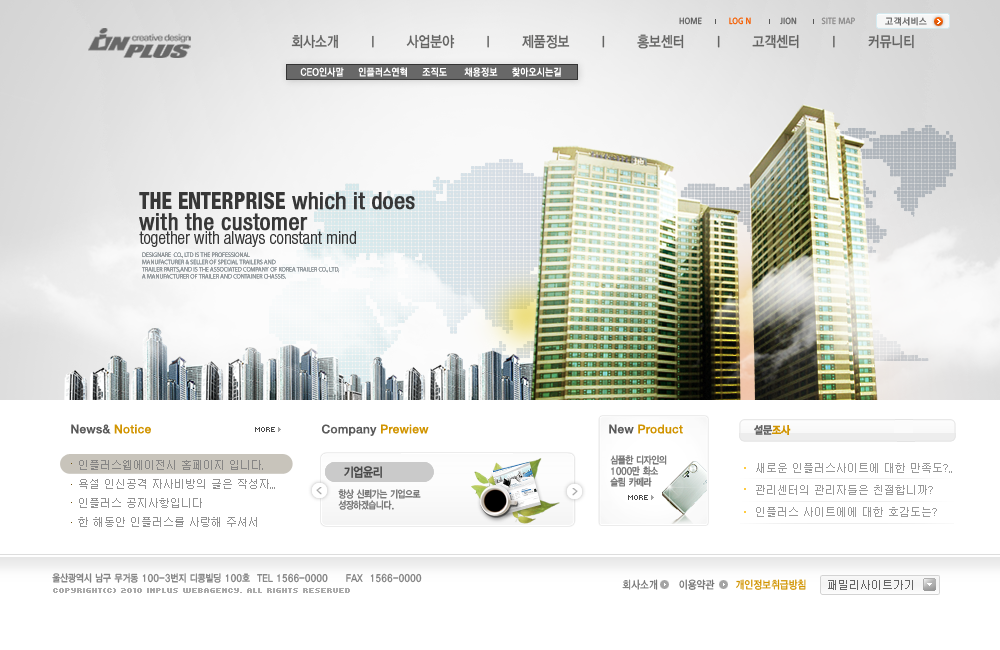
<style>
.page{position:relative;width:1000px;height:650px;background:#ffffff}
.page>*{position:absolute;margin:0}
.t1{font:9px "Moebius";color:#8d8c8c;text-transform:uppercase;scale:0.9 1}
.t2{font:9px "Moebius";color:#636363;text-transform:uppercase;scale:0.9 1}
.t3{font:9px "Moebius";color:#f55d00;text-transform:uppercase;scale:0.9 1}
.t4{font:9px "YGO530";letter-spacing:0.04em;color:#656565}
.t5{font:15px "YGO33";letter-spacing:-0.075em;color:#646362;scale:0.85 1}
.t6{font:10px "YGO540";letter-spacing:0.02em;color:#ffffff;scale:0.9 1}
.t7{font:23.5px/20.9px "HelveticaNeue-Condensed";color:#373737;font-weight:bold}
.t8{font:23.5px/20.9px "HelveticaNeue-HeavyCond";color:#373737;text-transform:uppercase;scale:0.9 1}
.t9{font:17.4px "HelveticaNeue-LightCond";color:#373737}
.t10{font:12px "Helvetica65-Medium";letter-spacing:0.02em;color:#d19400}
.t11{font:12px "Helvetica65-Medium";letter-spacing:0.02em;color:#5a5a5a}
.t12{font:11px "YGO15";letter-spacing:-0.09em;color:#646464;scale:0.9 1}
.t13{font:11px "YGO15";letter-spacing:-0.09em;color:#d19400;scale:0.9 1}
.t14{font:11px/19px "Dotum";color:#929292}
.t15{font:10px/11px "YGO33";letter-spacing:-0.115em;color:#747474;scale:0.85 1}
.t16{font:13px "YGO34";letter-spacing:-0.115em;color:#484848;scale:0.85 1}
.t17{font:11px/22px "Dotum";color:#999999}
.t18{font:11px/14px "Dotum";color:#999999}
.t19{font:10px "YGO33";letter-spacing:-0.075em;color:#828282;scale:0.85 1}
.t20{font:11px "YGO33";letter-spacing:-0.05em;color:#757575;scale:0.85 1}
.t21{font:11px "YGO33";letter-spacing:-0.05em;color:#d19400;scale:0.85 1}
.t22{font:11px "Dotum";color:#656565}
.t23{font:8px "Kroeger0555";color:#aaaaaa;font-weight:bold}
</style>
<div class="page">
<p class="t1" style="left:679px;top:17px;width:176px;height:8px"><span class="t2">Home             </span><span class="t3">Log n              </span><span class="t2">Jion</span>            Site map</p>
<p class="t4" style="left:885px;top:17px;width:42px;height:9px">고객서비스</p>
<p class="t5" style="left:291px;top:34px;width:623px;height:15px">회사소개      l      사업분야      l      제품정보      l      홍보센터      l      고객센터      l      커뮤니티</p>
<p class="t6" style="left:300px;top:67px;width:261px;height:10px">CEO인사말     인플러스연혁     조직도      채용정보     찾아오시는길</p>
<p class="t7" style="left:139px;top:192px;width:276px;height:39px"><span class="t8"><br>The enterprise </span>which it does<br>with the customer</p>
<p class="t9" style="left:139px;top:231px;width:217px;height:16px">together with always constant mind</p>
<p class="t10" style="left:71px;top:424px;width:80px;height:10px"><span class="t11">News&amp; </span>Notice</p>
<p class="t11" style="left:321px;top:424px;width:108px;height:12px">Company <span class="t10">Prewiew</span></p>
<p class="t10" style="left:609px;top:424px;width:74px;height:10px"><span class="t11">New </span>Product</p>
<p class="t12" style="left:754px;top:425px;width:37px;height:10px">설문<span class="t13">조사</span></p>
<p class="t14" style="left:78px;top:460px;width:197px;height:67px">인플러스웹에이전시 홈페이지 입니다.<br>욕설 인신공격 자사비방의 글은 작성자...<br>인플러스 공지사항입니다<br>한 해동안 인플러스를 사랑해 주셔서</p>
<p class="t15" style="left:610px;top:455px;width:57px;height:32px">심플한 디자인의<br>1000만 화소 <br>슬림 카메라</p>
<p class="t16" style="left:344px;top:466px;width:38px;height:12px">기업윤리</p>
<p class="t17" style="left:756px;top:463px;width:196px;height:54px"><span class="t18">새로운 인플러스사이트에 대한 만족도?..<br></span>관리센터의 관리자들은 친절합니까?<br>인플러스 사이트에에 대한 호감도는?</p>
<p class="t15" style="left:338px;top:489px;width:83px;height:21px">항상 신뢰가는 기업으로<br>성장하겠습니다.</p>
<p class="t19" style="left:52px;top:573px;width:370px;height:10px">울산광역시 남구 무거동 100-3번지 디콩빌딩 100호  TEL 1566-0000     FAX  1566-0000</p>
<p class="t20" style="left:622px;top:579px;width:184px;height:11px">회사소개     이용약관    <span class="t21"> 개인정보취급방침</span></p>
<p class="t22" style="left:828px;top:580px;width:85px;height:10px">패밀리사이트가기</p>
<p class="t23" style="left:53px;top:588px;width:297px;height:5px">COPYRIGHT(C) 2010 INPLUS WEBAGENCY. ALL RIGHTS RESERVED</p>
</div>
